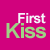
<style>
.page{position:relative;width:50px;height:50px;background:#d1027d}
.page>*{position:absolute;margin:0}
.t1{font:14px "Arial-BoldMT";letter-spacing:-0.04em;color:#f4f4fa}
.t2{font:21px "Arial-BoldMT";letter-spacing:-0.04em;color:#9ed384}
</style>
<div class="page">
<p class="t1" style="left:18px;top:13px;width:28px;height:11px">First</p>
<p class="t2" style="left:6px;top:23px;width:40px;height:16px">Kiss</p>
</div>
